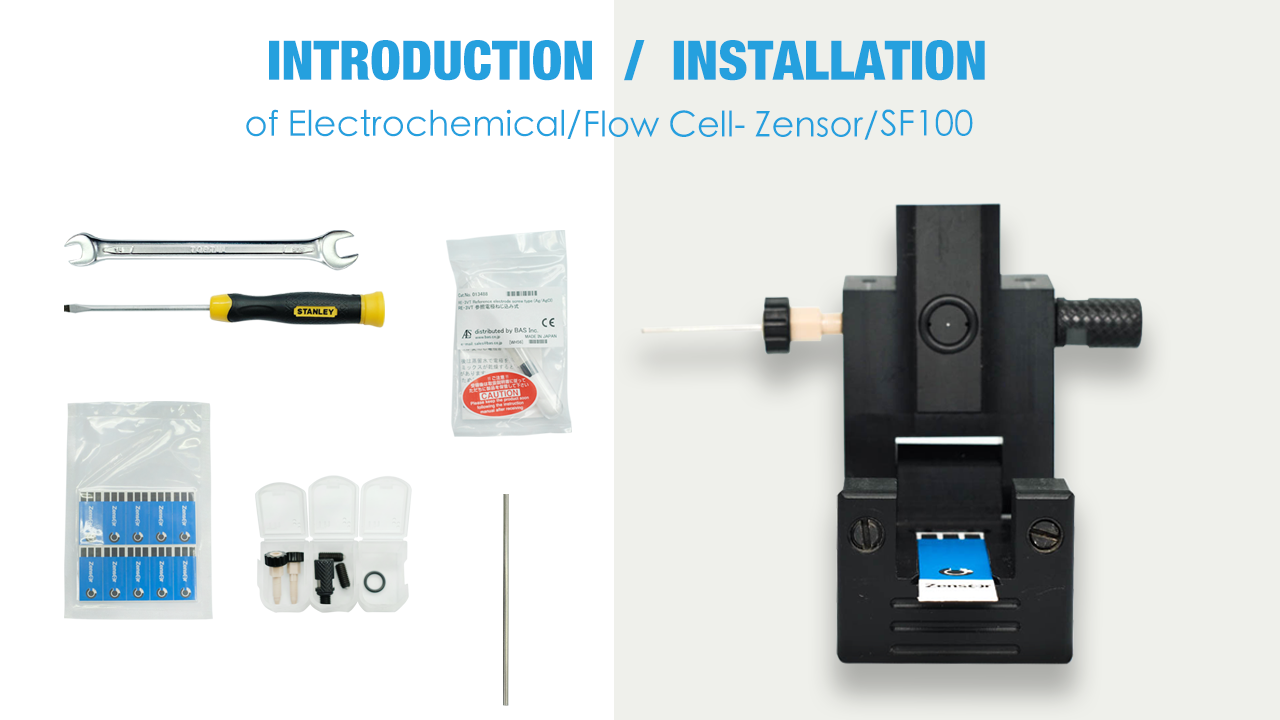
<style>
.page{position:relative;width:1280px;height:720px;background:#ffffff}
.page>*{position:absolute;margin:0}
.t1{font:54.8px "HelveticaNeue-CondensedBlack";color:#25a0de}
.t2{font:35.3px "STHeitiTC-Light";color:#25a0de}
</style>
<div class="page">
<p class="t1" style="left:269px;top:40px;width:323px;height:41px">INTRODUCTION</p>
<p class="t1" style="left:624px;top:40px;width:361px;height:41px">/  INSTALLATION</p>
<p class="t2" style="left:246px;top:109px;width:335px;height:30px">of Electrochemical/</p>
<p class="t2" style="left:585px;top:110px;width:293px;height:30px">Flow Cell- Zensor/</p>
<p class="t2" style="left:880px;top:109px;width:93px;height:27px">SF100</p>
</div>
